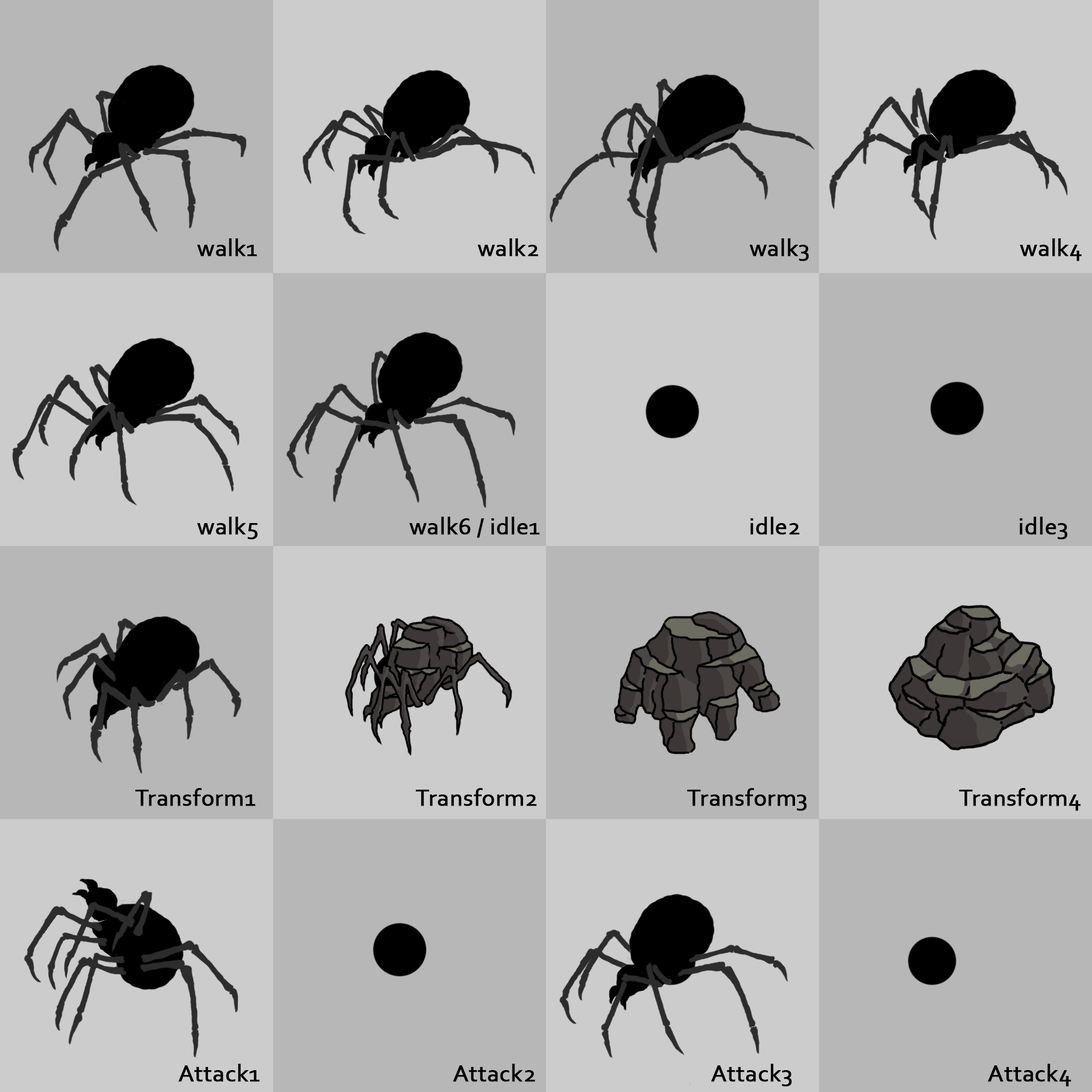
<style>
.page{position:relative;width:1092px;height:1092px;background:#b7b7b7}
.page>*{position:absolute;margin:0}
.t1{font:24.3px "Corbel";color:#000000;font-weight:bold}
</style>
<div class="page">
<p class="t1" style="left:197px;top:238px;width:60px;height:18px">walk1</p>
<p class="t1" style="left:478px;top:238px;width:61px;height:18px">walk2</p>
<p class="t1" style="left:750px;top:238px;width:59px;height:23px">walk3</p>
<p class="t1" style="left:1020px;top:238px;width:62px;height:23px">walk4</p>
<p class="t1" style="left:197px;top:517px;width:61px;height:23px">walk5</p>
<p class="t1" style="left:409px;top:517px;width:131px;height:21px">walk6 / idle1</p>
<p class="t1" style="left:750px;top:517px;width:50px;height:18px">idle2</p>
<p class="t1" style="left:1019px;top:517px;width:48px;height:23px">idle3</p>
<p class="t1" style="left:135px;top:788px;width:120px;height:18px">Transform1</p>
<p class="t1" style="left:415px;top:788px;width:122px;height:18px">Transform2</p>
<p class="t1" style="left:687px;top:788px;width:120px;height:23px">Transform3</p>
<p class="t1" style="left:959px;top:788px;width:122px;height:23px">Transform4</p>
<p class="t1" style="left:178px;top:1064px;width:82px;height:18px">Attack1</p>
<p class="t1" style="left:453px;top:1064px;width:82px;height:18px">Attack2</p>
<p class="t1" style="left:711px;top:1064px;width:81px;height:23px">Attack3</p>
<p class="t1" style="left:987px;top:1064px;width:84px;height:23px">Attack4</p>
</div>
